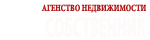
<style>
.page{position:relative;width:150px;height:40px;background:#ffffff}
.page>*{position:absolute;margin:0}
.t1{font:9.6px "MinionPro-BoldCn";color:#af1a1a;scale:0.83 1}
.t2{font:28px "MyriadPro-Bold";color:#fffafa;font-weight:bold;scale:0.5 1}
</style>
<div class="page">
<p class="t1" style="left:41px;top:4px;width:105px;height:9px">АГЕНСТВО НЕДВИЖИМОСТИ</p>
<p class="t2" style="left:45px;top:17px;width:101px;height:21px">СОБСТВЕННИК</p>
</div>
